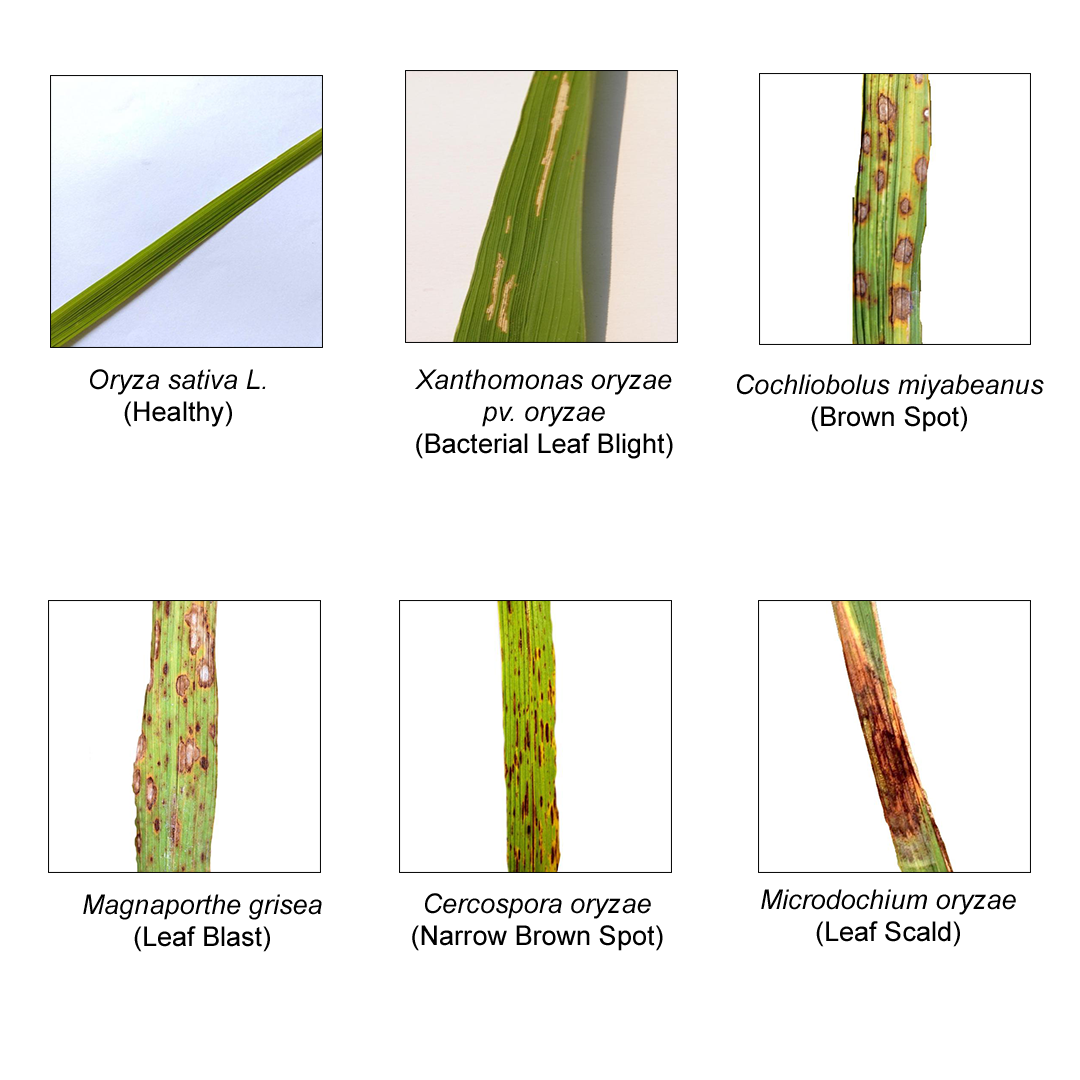
<style>
.page{position:relative;width:1080px;height:1080px;background:#ffffff}
.page>*{position:absolute;margin:0}
.t1{font:27.1px "Arial-ItalicMT";color:#000000}
.t2{font:27.1px "ArialMT";color:#000000}
</style>
<div class="page">
<p class="t1" style="left:90px;top:369px;width:176px;height:58px;text-align:center">Oryza sativa L.<br><span class="t2">(Healthy)</span></p>
<p class="t1" style="left:415px;top:369px;width:258px;height:90px;text-align:center">Xanthomonas oryzae<br>pv. oryzae<br><span class="t2">(Bacterial Leaf Blight)</span></p>
<p class="t1" style="left:737px;top:374px;width:307px;height:58px;text-align:center">Cochliobolus miyabeanus<br><span class="t2">(Brown Spot)</span></p>
<p class="t1" style="left:83px;top:894px;width:239px;height:58px;text-align:center">Magnaporthe grisea<br><span class="t2">(Leaf Blast)</span></p>
<p class="t2" style="left:412px;top:893px;width:251px;height:58px;text-align:center"><span class="t1">Cercospora oryzae<br></span>(Narrow Brown Spot)</p>
<p class="t1" style="left:761px;top:889px;width:255px;height:58px;text-align:center">Microdochium oryzae<br><span class="t2">(Leaf Scald)</span></p>
</div>
